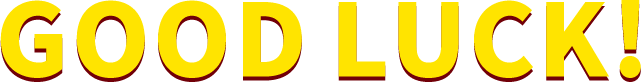
<style>
.page{position:relative;width:641px;height:82px;background:#ffffff}
.page>*{position:absolute;margin:0}
.t1{font:100px "NotoSansCJKsc-Black";color:#ffe400}
</style>
<div class="page">
<p class="t1" style="left:0px;top:0px;width:641px;height:78px">GOOD LUCK!</p>
</div>
